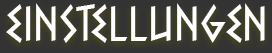
<style>
.page{position:relative;width:272px;height:53px}
.page>*{position:absolute;margin:0}
.t1{font:50px "Xtra";color:#ffffff}
</style>
<div class="page">
<p class="t1" style="left:6px;top:3px;width:259px;height:40px">Einstellungen</p>
</div>
